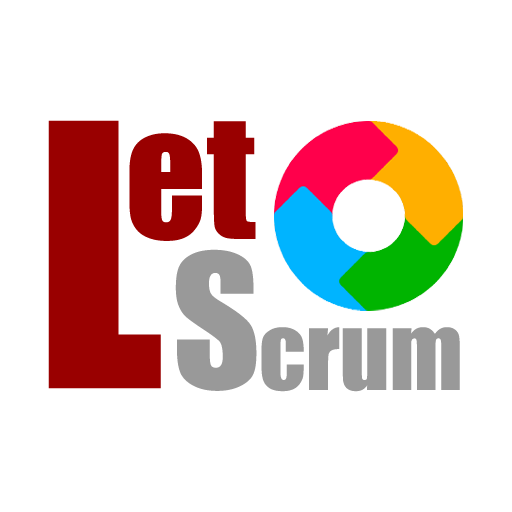
<style>
.page{position:relative;width:512px;height:512px;background:#ffffff}
.page>*{position:absolute;margin:0}
.t1{font:338px "Impact";color:#990000}
.t2{font:160px "Impact";color:#990000}
.t3{font:171px "Impact";color:#999999}
.t4{font:95px "Impact";color:#999999}
</style>
<div class="page">
<p class="t1" style="left:48px;top:120px;width:113px;height:269px">L</p>
<p class="t2" style="left:129px;top:121px;width:127px;height:120px">et</p>
<p class="t3" style="left:175px;top:249px;width:82px;height:142px">S</p>
<p class="t4" style="left:261px;top:327px;width:199px;height:65px">crum</p>
</div>
